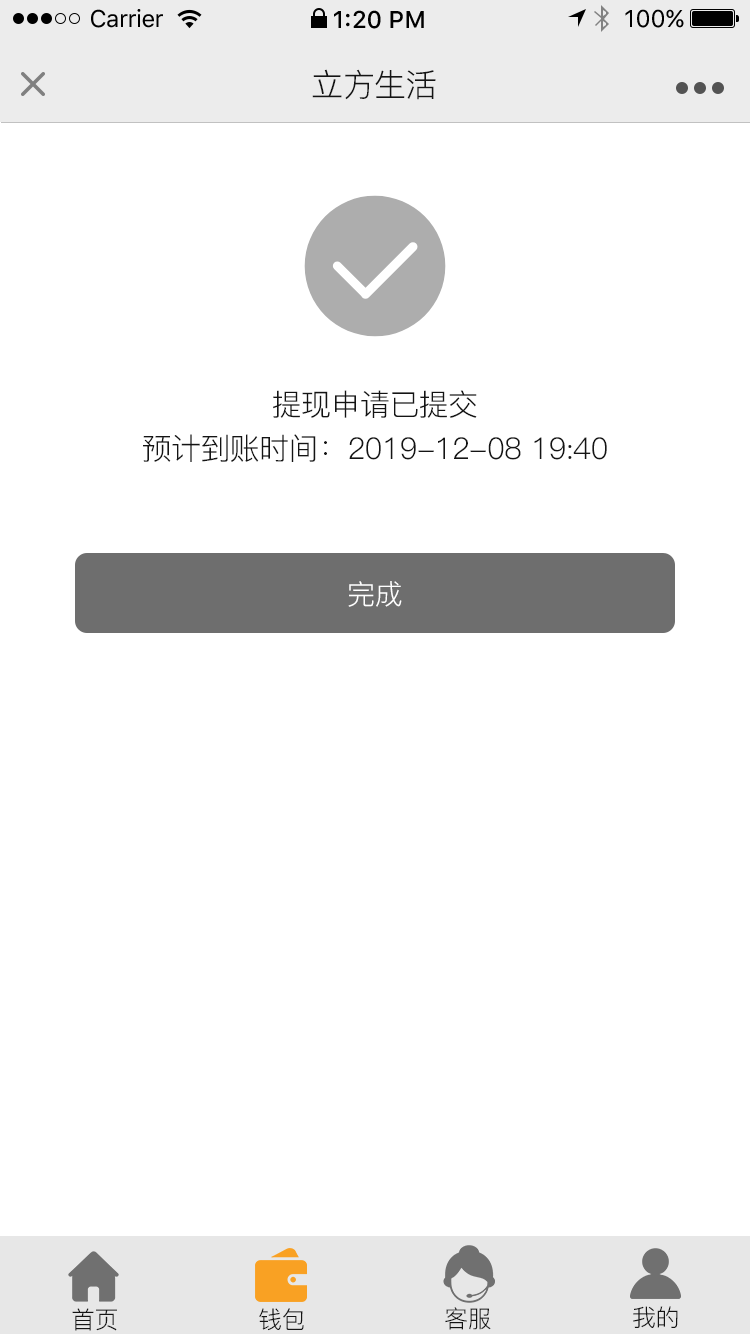
<style>
.page{position:relative;width:750px;height:1334px;background:#ffffff}
.page>*{position:absolute;margin:0}
.t1{font:24px "SFUIText-Regular";letter-spacing:-0.025em;color:#000000}
.t2{font:24px "SFUIText-Medium";color:#000000}
.t3{font:24px "SFUIText-Regular";color:#000000}
.t4{font:32.2px "PingFang-SC-Regular";letter-spacing:-0.02em;color:#141414}
.t5{font:30px/44px "PingFang-SC-Regular";letter-spacing:-0.02em;color:#141414}
.t6{font:28px "PingFang-SC-Regular";letter-spacing:-0.024em;color:#ffffff}
.t7{font:24px "PingFang-SC-Regular";letter-spacing:-0.02em;color:#141414}
</style>
<div class="page">
<p class="t1" style="left:91px;top:9px;width:72px;height:19px">Carrier</p>
<p class="t2" style="left:334px;top:10px;width:90px;height:19px">1:20 PM</p>
<p class="t3" style="left:625px;top:9px;width:59px;height:19px">100%</p>
<p class="t4" style="left:312px;top:69px;width:124px;height:31px">立方生活</p>
<p class="t5" style="left:143px;top:390px;width:464px;height:72px;text-align:center">提现申请已提交<br>预计到账时间：2019-12-08 19:40</p>
<p class="t6" style="left:348px;top:581px;width:54px;height:26px">完成</p>
<p class="t7" style="left:72px;top:1308px;width:45px;height:23px">首页</p>
<p class="t7" style="left:259px;top:1308px;width:45px;height:23px">钱包</p>
<p class="t7" style="left:445px;top:1307px;width:46px;height:23px">客服</p>
<p class="t7" style="left:633px;top:1306px;width:45px;height:22px">我的</p>
</div>
